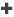
<style>
.page{position:relative;width:14px;height:17px;background:#ffffff}
.page>*{position:absolute;margin:0}
.t1{font:22px "HelveticaNeueLTStd-Hv";color:#3c4145}
</style>
<div class="page">
<p class="t1" style="left:1px;top:2px;width:12px;height:12px">+</p>
</div>
